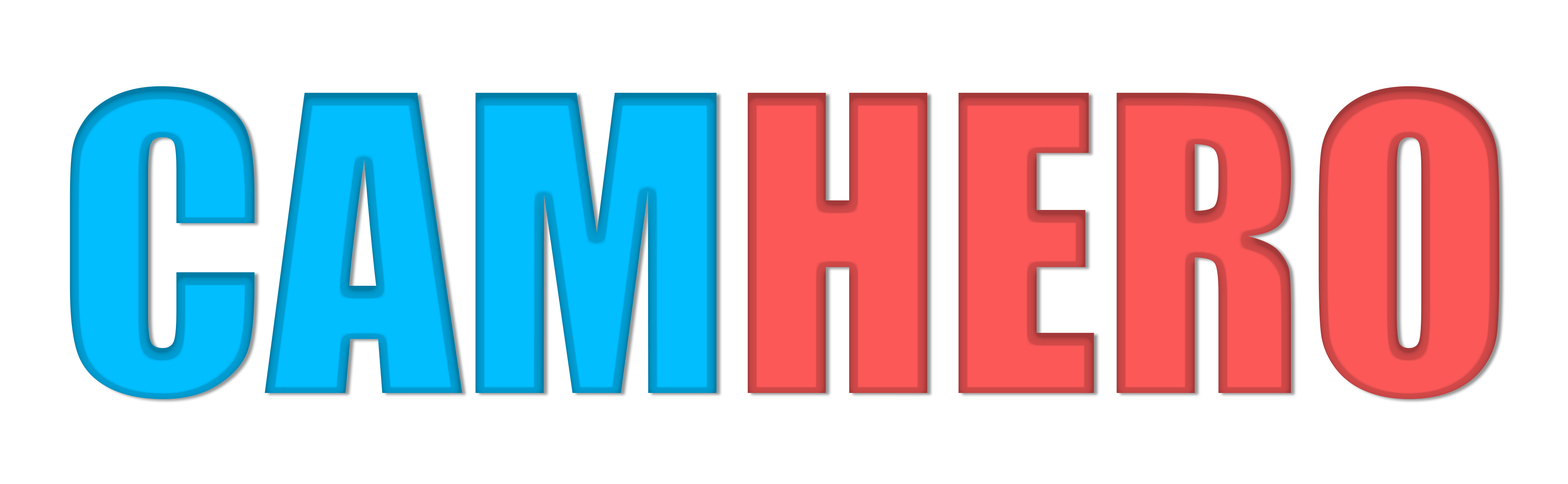
<style>
.page{position:relative;width:1568px;height:484px;background:#ffffff}
.page>*{position:absolute;margin:0}
.t1{font:379.8px "Impact";color:#fc5858}
.t2{font:379.8px "Impact";color:#00beff}
</style>
<div class="page">
<p class="t1" style="left:70px;top:86px;width:1430px;height:313px"><span class="t2">CAM</span>HERO</p>
</div>
